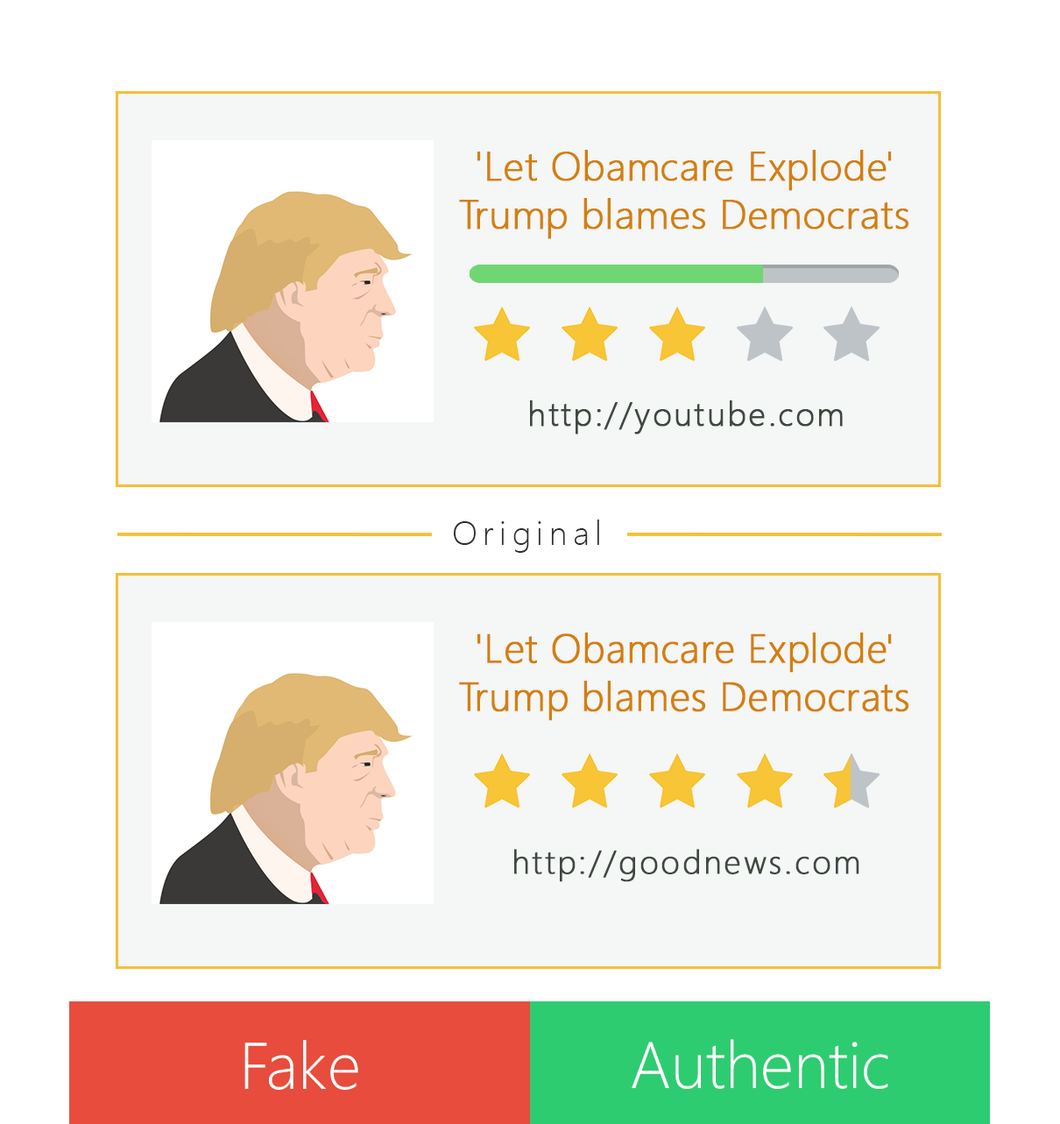
<style>
.page{position:relative;width:1060px;height:1124px;background:#ffffff}
.page>*{position:absolute;margin:0}
.t1{font:40.2px "SegoeUI-Light";color:#d47f0c;font-weight:bold}
.t2{font:32.9px "SegoeUI-Light";letter-spacing:0.06em;color:#3f483f;font-weight:bold}
.t3{font:32.9px "SegoeUI-Light";letter-spacing:0.18em;color:#2e2e2e}
.t4{font:33px "SegoeUI-Light";letter-spacing:0.06em;color:#3f483f;font-weight:bold}
.t5{font:66px "SegoeUI-Light";color:#ffffff}
.t6{font:66px "SegoeUI-Light";color:#ffffff;text-transform:uppercase}
.t7{font:65.7px "SegoeUI-Light";color:#ffffff}
.t8{font:65.7px "SegoeUI-Light";color:#ffffff;text-transform:uppercase}
</style>
<div class="page">
<p class="t1" style="left:459px;top:150px;width:450px;height:89px;text-align:center">'Let Obamcare Explode' <br>Trump blames Democrats</p>
<p class="t2" style="left:530px;top:401px;width:313px;height:34px">http://youtube.com</p>
<p class="t3" style="left:453px;top:520px;width:146px;height:33px">Original</p>
<p class="t1" style="left:459px;top:633px;width:450px;height:88px;text-align:center">'Let Obamcare Explode' <br>Trump blames Democrats</p>
<p class="t4" style="left:514px;top:849px;width:346px;height:34px">http://goodnews.com</p>
<p class="t5" style="left:245px;top:1040px;width:113px;height:50px"><span class="t6">f</span>ake</p>
<p class="t7" style="left:632px;top:1039px;width:257px;height:50px"><span class="t8">a</span>uthentic</p>
</div>
